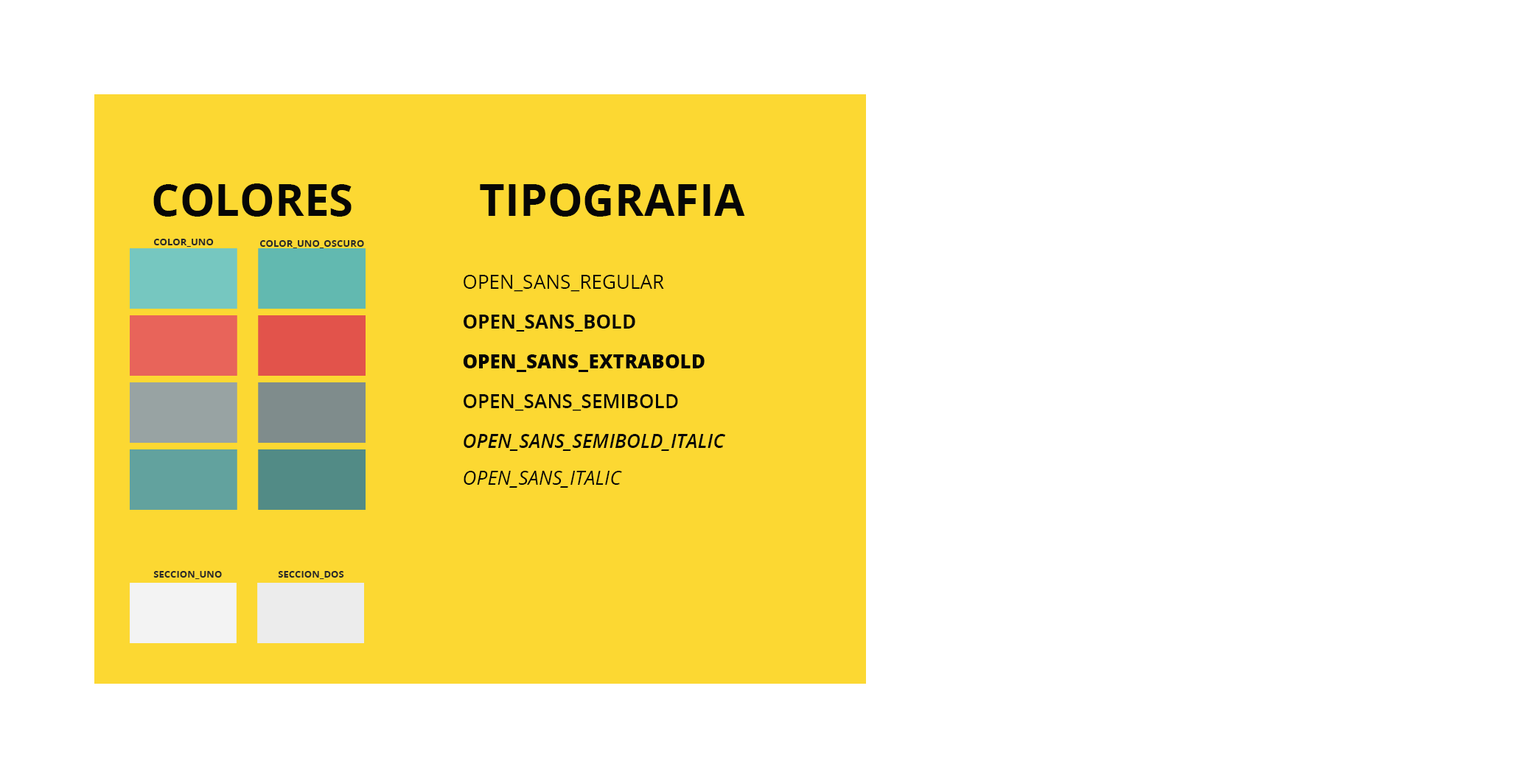
<style>
.page{position:relative;width:1533px;height:778px;background:#ffffff}
.page>*{position:absolute;margin:0}
.t1{font:44.2px "OpenSans-Bold";color:#060606}
.t2{font:9.7px "OpenSans-Bold";color:#292929}
.t3{font:19.3px "OpenSans";color:#060606}
.t4{font:19.3px "OpenSans-Bold";color:#060606}
.t5{font:19.3px "OpenSans-Extrabold";color:#060606}
.t6{font:19.3px "OpenSans-Semibold";color:#060606}
.t7{font:19.3px "OpenSans-SemiboldItalic";color:#060606}
.t8{font:19.3px "OpenSans-Italic";color:#060606}
</style>
<div class="page">
<p class="t1" style="left:153px;top:183px;width:198px;height:34px">COLORES</p>
<p class="t1" style="left:480px;top:183px;width:265px;height:34px">TIPOGRAFIA</p>
<p class="t2" style="left:153px;top:239px;width:61px;height:8px">COLOR_UNO</p>
<p class="t2" style="left:259px;top:240px;width:105px;height:8px">COLOR_UNO_OSCURO</p>
<p class="t3" style="left:463px;top:275px;width:201px;height:17px">OPEN_SANS_REGULAR</p>
<p class="t4" style="left:463px;top:315px;width:172px;height:17px">OPEN_SANS_BOLD</p>
<p class="t5" style="left:463px;top:354px;width:241px;height:18px">OPEN_SANS_EXTRABOLD</p>
<p class="t6" style="left:463px;top:394px;width:215px;height:17px">OPEN_SANS_SEMIBOLD</p>
<p class="t7" style="left:463px;top:434px;width:262px;height:17px">OPEN_SANS_SEMIBOLD_ITALIC</p>
<p class="t8" style="left:463px;top:471px;width:159px;height:17px">OPEN_SANS_ITALIC</p>
<p class="t2" style="left:153px;top:571px;width:69px;height:8px">SECCION_UNO</p>
<p class="t2" style="left:278px;top:571px;width:66px;height:8px">SECCION_DOS</p>
</div>
